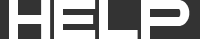
<style>
.page{position:relative;width:200px;height:39px;background:#333333}
.page>*{position:absolute;margin:0}
.t1{font:75px "Bitsumishi";color:#ffffff}
</style>
<div class="page">
<p class="t1" style="left:9px;top:0px;width:181px;height:39px">Help</p>
</div>
